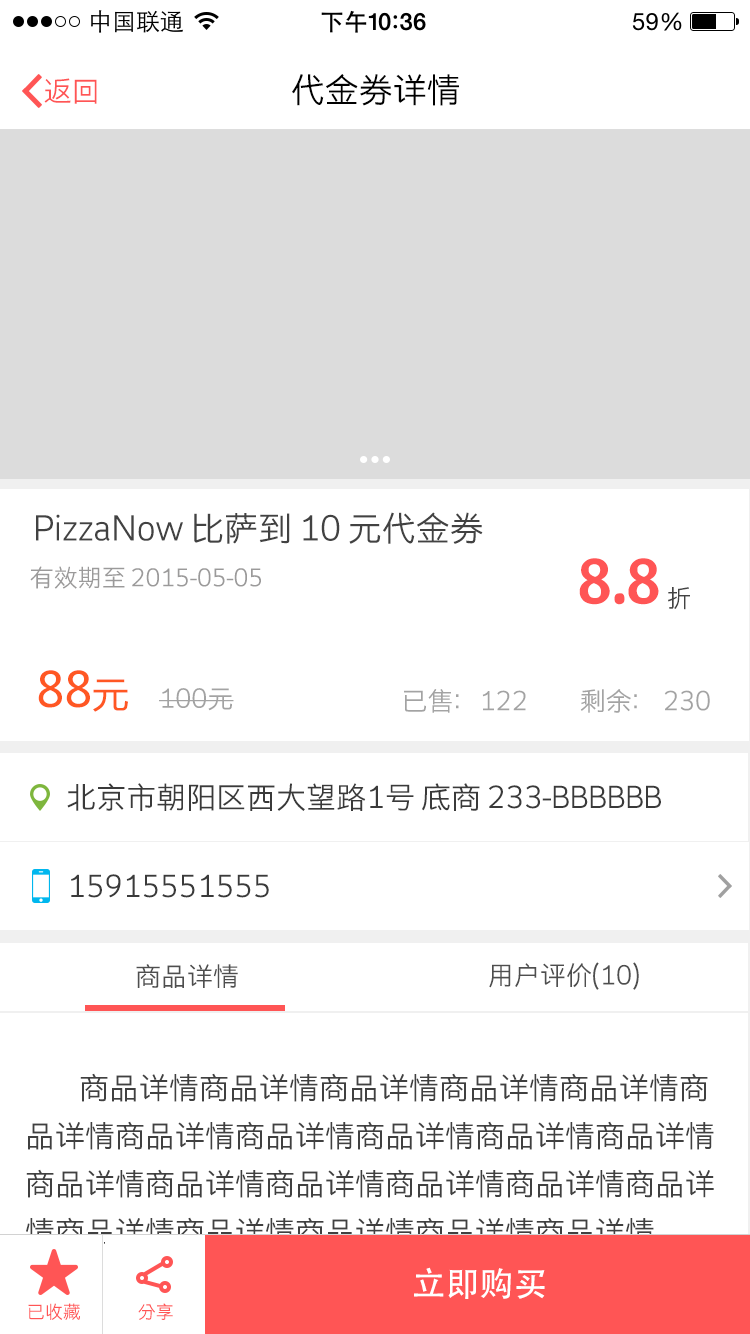
<style>
.page{position:relative;width:750px;height:1334px;background:#ffffff}
.page>*{position:absolute;margin:0}
.t1{font:28px "STHeitiSC-Light";color:#ff5555}
.t2{font:34px "STHeitiSC-Light";color:#000000}
.t3{font:34px "STHeitiSC-Light";color:#424242}
.t4{font:72px "STHeitiSC-Medium";color:#ff5555}
.t5{font:24px "STHeitiSC-Light";color:#434343}
.t6{font:24px "STHeitiSC-Light";color:#9b9a9a}
.t7{font:48px "MicrosoftYaHei";color:#ff5723}
.t8{font:36px "MicrosoftYaHei";color:#ff5723}
.t9{font:26px "STHeitiSC-Light";color:#a3a3a3}
.t10{font:30px "STHeitiSC-Light";color:#3a3a3a}
.t11{font:26px "STHeitiSC-Light";color:#4e4e4e}
.t12{font:30px/48px "STHeitiSC-Light";color:#404040}
.t13{font:34px "AdobeHeitiStd-Regular";color:#ffffff}
.t14{font:18px "STHeitiSC-Light";color:#ff5555}
</style>
<div class="page">
<p class="t1" style="left:44px;top:78px;width:53px;height:26px">返回</p>
<p class="t2" style="left:292px;top:74px;width:167px;height:32px">代金券详情</p>
<p class="t3" style="left:36px;top:512px;width:447px;height:32px">PizzaNow 比萨到 10 元代金券</p>
<p class="t4" style="left:579px;top:558px;width:111px;height:52px">8.8 <span class="t5">折</span></p>
<p class="t6" style="left:30px;top:566px;width:231px;height:23px">有效期至 2015-05-05</p>
<p class="t7" style="left:38px;top:670px;width:90px;height:42px">88<span class="t8">元</span></p>
<p class="t9" style="left:159px;top:688px;width:75px;height:23px">100元</p>
<p class="t9" style="left:404px;top:689px;width:306px;height:24px">已售：122          剩余： 230</p>
<p class="t10" style="left:67px;top:783px;width:594px;height:28px">北京市朝阳区西大望路1号 底商 233-BBBBBB</p>
<p class="t10" style="left:71px;top:874px;width:198px;height:24px">15915551555</p>
<p class="t11" style="left:136px;top:964px;width:102px;height:24px">商品详情</p>
<p class="t11" style="left:489px;top:962px;width:150px;height:28px">用户评价(10)</p>
<p class="t12" style="left:26px;top:1073px;width:688px;height:173px">商品详情商品详情商品详情商品详情商品详情商<br>品详情商品详情商品详情商品详情商品详情商品详情<br>商品详情商品详情商品详情商品详情商品详情商品详<br>情商品详情商品详情商品详情商品详情商品详情</p>
<p class="t13" style="left:414px;top:1267px;width:131px;height:32px">立即购买</p>
<p class="t14" style="left:28px;top:1303px;width:52px;height:17px">已收藏</p>
<p class="t14" style="left:138px;top:1303px;width:35px;height:17px">分享</p>
</div>
